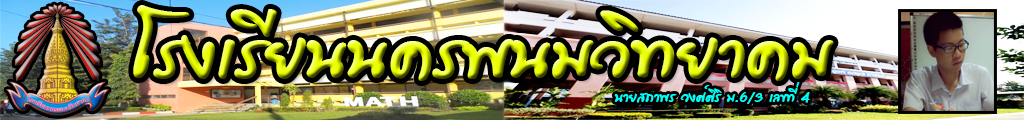
<style>
.page{position:relative;width:1024px;height:120px}
.page>*{position:absolute;margin:0}
.t1{font:100px "PSLFreestyleBold"}
.t2{font:20px "PSLFreestyleBold";color:#00fff6}
</style>
<div class="page">
<p class="t1" style="left:133px;top:5px;width:701px;height:76px">โรงเรียนนครพนมวิทยาคม</p>
<p class="t2" style="left:614px;top:82px;width:196px;height:22px">นายสถาพร วงศ์ศิริ ม.6/3 เลขที่ 4</p>
</div>
